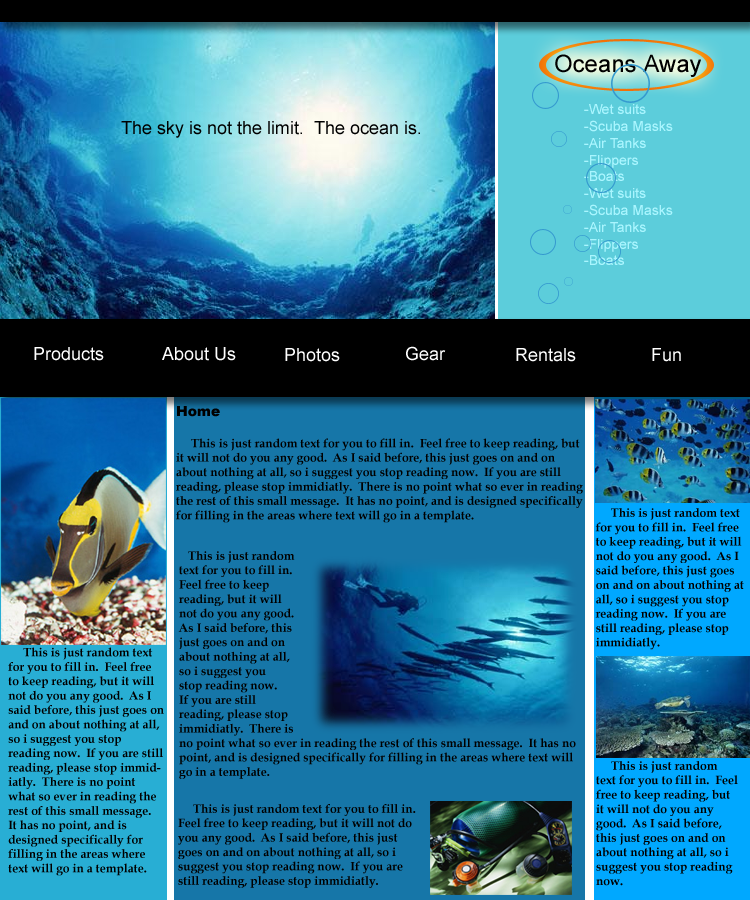
<style>
.page{position:relative;width:750px;height:900px}
.page>*{position:absolute;margin:0}
.t1{font:24px "ArialMT";color:#000000}
.t2{font:14px "ArialMT";color:#a9f5fe}
.t3{font:18px "ArialMT";color:#000000}
.t4{font:18px "ArialMT";color:#ffffff}
.t5{font:12px "BookAntiqua-Bold";color:#000000}
.t6{font:14px "Arial-Black";color:#000000}
</style>
<div class="page">
<p class="t1" style="left:555px;top:54px;width:146px;height:23px">Oceans Away</p>
<p class="t2" style="left:584px;top:104px;width:89px;height:161px">-Wet suits<br>-Scuba Masks<br>-Air Tanks<br>-Flippers<br>-Boats<br>-Wet suits<br>-Scuba Masks<br>-Air Tanks<br>-Flippers<br>-Boats</p>
<p class="t3" style="left:121px;top:121px;width:299px;height:17px">The sky is not the limit.  The ocean is.</p>
<p class="t4" style="left:34px;top:347px;width:70px;height:14px">Products</p>
<p class="t4" style="left:162px;top:347px;width:74px;height:14px">About Us</p>
<p class="t4" style="left:285px;top:348px;width:55px;height:14px">Photos</p>
<p class="t4" style="left:406px;top:346px;width:40px;height:15px">Gear</p>
<p class="t4" style="left:516px;top:348px;width:60px;height:14px">Rentals</p>
<p class="t4" style="left:652px;top:348px;width:29px;height:14px">Fun</p>
<p class="t5" style="left:176px;top:406px;width:407px;height:117px"><span class="t6">Home<br><br></span>     This is just random text for you to fill in.  Feel free to keep reading, but it will not do you any good.  As I said before, this just goes on and on about nothing at all, so i suggest you stop reading now.  If you are still reading, please stop immidiatly.  There is no point what so ever in reading the rest of this small message.  It has no point, and is designed specifically for filling in the areas where text will go in a template.</p>
<p class="t5" style="left:595px;top:508px;width:149px;height:142px">This is just random text for you to fill in.  Feel free to keep reading, but it will not do you any good.  As I said before, this just goes on and on about nothing at all, so i suggest you stop reading now.  If you are still reading, please stop immidiatly.</p>
<p class="t5" style="left:178px;top:551px;width:398px;height:228px">This is just random<br>text for you to fill in.  <br>Feel free to keep <br>reading, but it will <br>not do you any good. <br>As I said before, this <br>just goes on and on <br>about nothing at all, <br>so i suggest you <br>stop reading now.  <br>If you are still <br>reading, please stop <br>immidiatly.  There is <br>no point what so ever in reading the rest of this small message.  It has no point, and is designed specifically for filling in the areas where text will go in a template.</p>
<p class="t5" style="left:8px;top:647px;width:156px;height:229px">This is just random text for you to fill in.  Feel free to keep reading, but it will not do you any good.  As I said before, this just goes on and on about nothing at all, so i suggest you stop reading now.  If you are still reading, please stop immidiatly.  There is no point what so ever in reading the rest of this small message.  It has no point, and is designed specifically for filling in the areas where text will go in a template.</p>
<p class="t5" style="left:596px;top:761px;width:142px;height:125px">This is just random text for you to fill in.  Feel free to keep reading, but it will not do you any good.  As I said before, this just goes on and on about nothing at all, so i suggest you stop reading now.</p>
<p class="t5" style="left:178px;top:804px;width:238px;height:84px">This is just random text for you to fill in.  Feel free to keep reading, but it will not do you any good.  As I said before, this just goes on and on about nothing at all, so i suggest you stop reading now.  If you are still reading, please stop immidiatly.</p>
</div>
